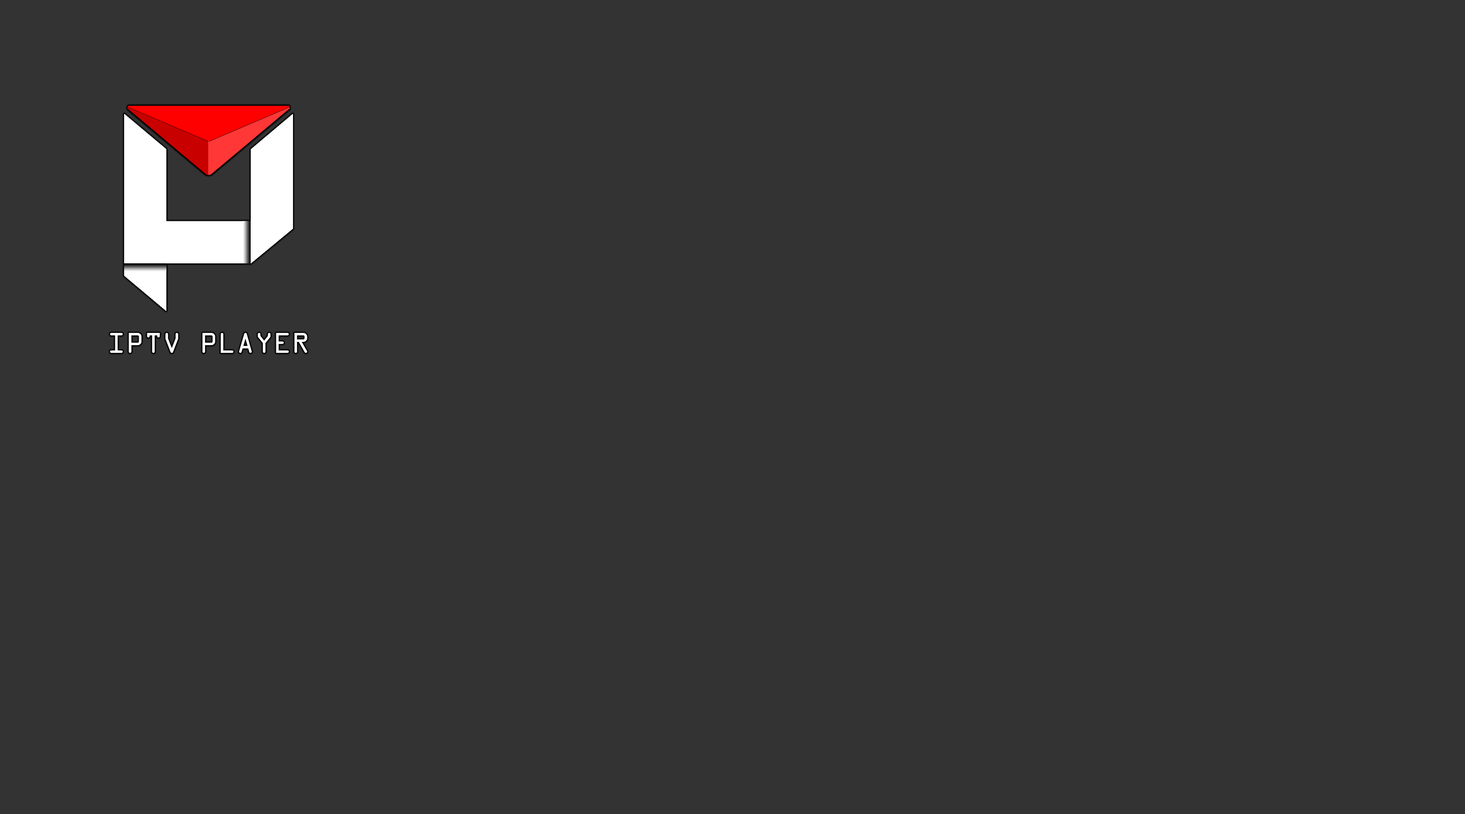
<style>
.page{position:relative;width:1465px;height:814px;background:#333333}
.page>*{position:absolute;margin:0}
.t1{font:30.5px "OCRAExtended";color:#ffffff}
</style>
<div class="page">
<p class="t1" style="left:110px;top:333px;width:197px;height:20px">IPTV PLAYER</p>
</div>
